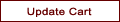
<style>
.page{position:relative;width:120px;height:22px;background:#ffffff}
.page>*{position:absolute;margin:0}
.t1{font:10px "ArialMT";letter-spacing:0.025em;color:#660000;scale:1.15 1}
</style>
<div class="page">
<p class="t1" style="left:27px;top:7px;width:65px;height:10px">Update Cart</p>
</div>
